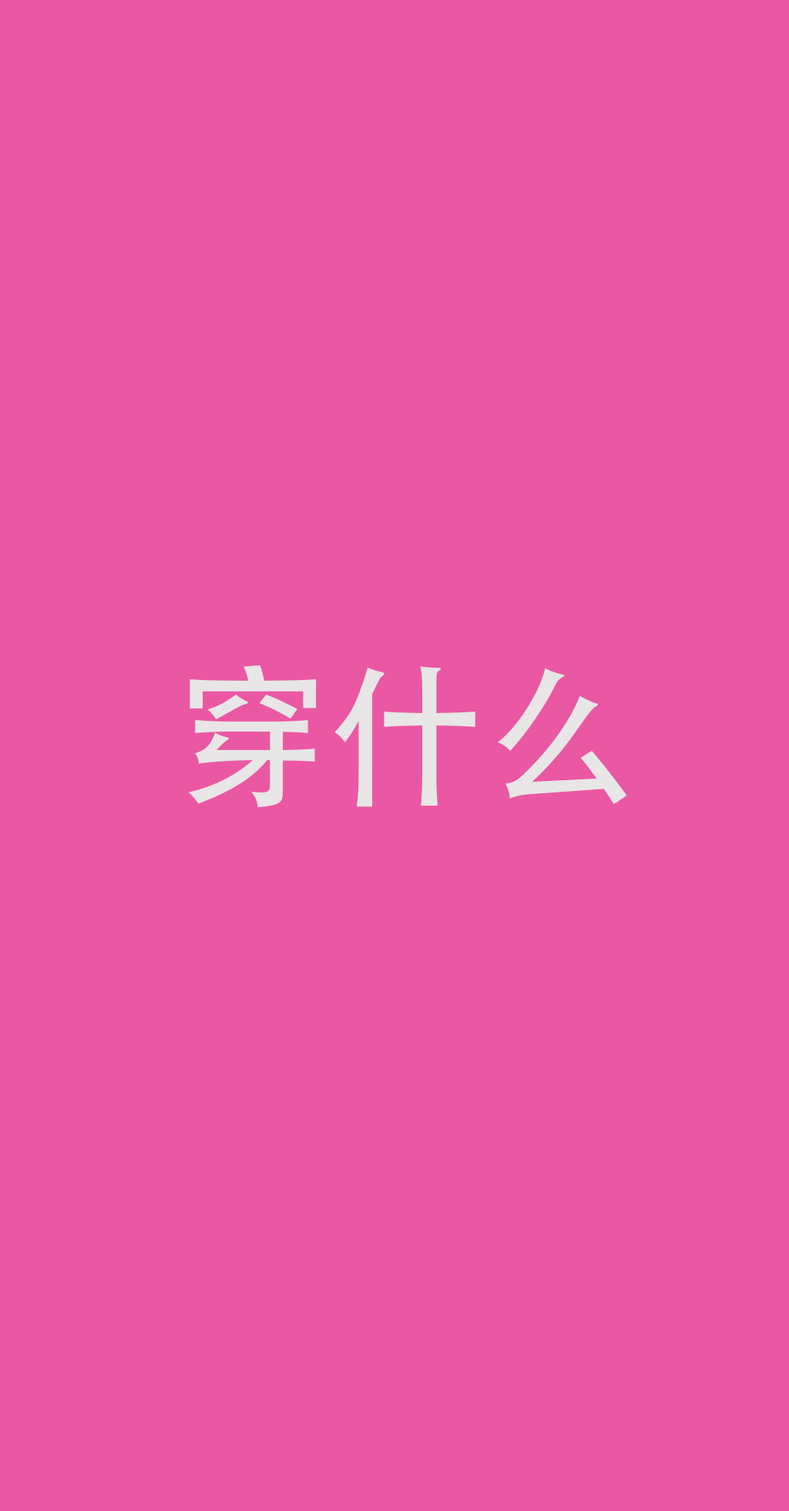
<style>
.page{position:relative;width:789px;height:1511px;background:#ea58a4}
.page>*{position:absolute;margin:0}
.t1{font:154.2px "AdobeHeitiStd-Regular";color:#e8e6e6}
</style>
<div class="page">
<p class="t1" style="left:188px;top:664px;width:439px;height:144px">穿什么</p>
</div>
